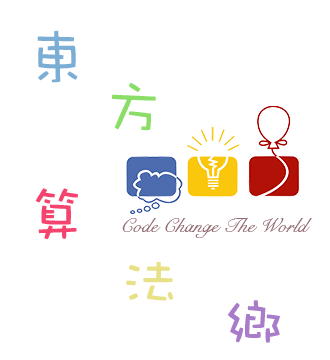
<style>
.page{position:relative;width:330px;height:360px;background:#ffffff}
.page>*{position:absolute;margin:0}
.t1{font:60px "DFWaWaSC-W5";color:#7baed4}
.t2{font:60px "DFWaWaSC-W5";color:#8add66}
.t3{font:60px "DFWaWaSC-W5";color:#f4436d}
.t4{font:20px "SnellRoundhand";color:#946d73}
.t5{font:60px "DFWaWaSC-W5";color:#e9e187}
.t6{font:60px "DFWaWaSC-W5";color:#a97cca}
</style>
<div class="page">
<p class="t1" style="left:37px;top:30px;width:41px;height:53px">東</p>
<p class="t2" style="left:112px;top:82px;width:44px;height:49px">方</p>
<p class="t3" style="left:35px;top:188px;width:43px;height:52px">算</p>
<p class="t4" style="left:122px;top:218px;width:190px;height:20px">Code Change The World</p>
<p class="t5" style="left:126px;top:262px;width:48px;height:39px">法</p>
<p class="t6" style="left:227px;top:300px;width:53px;height:43px">鄉</p>
</div>
